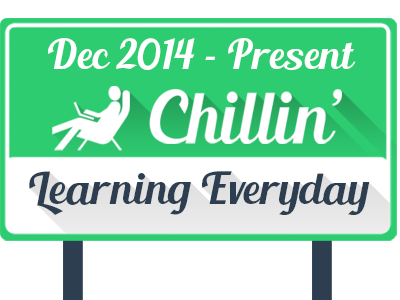
<style>
.page{position:relative;width:400px;height:300px;background:#ffffff}
.page>*{position:absolute;margin:0}
.t1{font:41px "BlendaScript";color:#ffffff}
.t2{font:43.4px "BlendaScript";color:#2c3e50}
</style>
<div class="page">
<p class="t1" style="left:48px;top:38px;width:308px;height:32px">Dec 2014 - Present</p>
<p class="t2" style="left:29px;top:171px;width:341px;height:44px">Learning Everyday</p>
</div>
